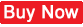
<style>
.page{position:relative;width:83px;height:27px;background:#ed1c24}
.page>*{position:absolute;margin:0}
.t1{font:18px "ArialMT";color:#ffffff;font-weight:bold}
</style>
<div class="page">
<p class="t1" style="left:4px;top:5px;width:75px;height:17px">Buy Now</p>
</div>
